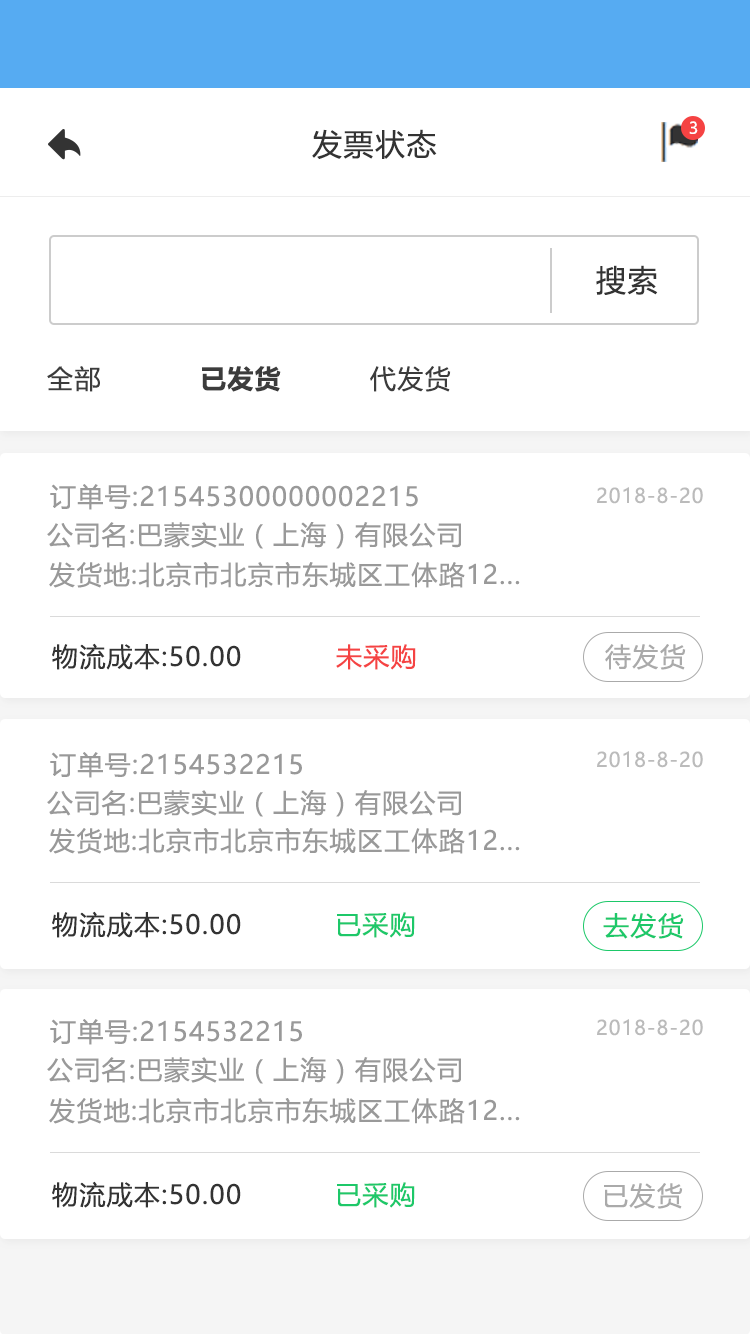
<style>
.page{position:relative;width:750px;height:1334px;background:#ffffff}
.page>*{position:absolute;margin:0}
.t1{font:16px "MicrosoftYaHeiUI";color:#ffffff}
.t2{font:30px "MicrosoftYaHeiUI";letter-spacing:0.05em;color:#333333}
.t3{font:26px "MicrosoftYaHeiUI";letter-spacing:0.05em;color:#3c3c3c}
.t4{font:26px "MicrosoftYaHeiUI-Bold";letter-spacing:0.05em;color:#3c3c3c}
.t5{font:26px "MicrosoftYaHeiUI";letter-spacing:0.05em;color:#999999}
.t6{font:20px "MicrosoftYaHeiUI";letter-spacing:0.05em;color:#bbbbbb}
.t7{font:26px "MicrosoftYaHeiUI";letter-spacing:0.05em;color:#333333}
.t8{font:26px "MicrosoftYaHeiUI";letter-spacing:0.05em;color:#f54343}
.t9{font:26px "MicrosoftYaHeiUI";letter-spacing:0.05em;color:#aaaaaa}
.t10{font:26px "MicrosoftYaHeiUI";letter-spacing:0.05em;color:#1dc869}
</style>
<div class="page">
<p class="t1" style="left:689px;top:121px;width:9px;height:13px">3</p>
<p class="t2" style="left:312px;top:129px;width:125px;height:30px">发票状态</p>
<p class="t2" style="left:596px;top:265px;width:62px;height:30px">搜索</p>
<p class="t3" style="left:47px;top:366px;width:53px;height:26px">全部</p>
<p class="t4" style="left:202px;top:366px;width:79px;height:26px">已发货</p>
<p class="t3" style="left:370px;top:366px;width:81px;height:26px">代发货</p>
<p class="t5" style="left:50px;top:484px;width:368px;height:26px">订单号:21545300000002215</p>
<p class="t6" style="left:597px;top:487px;width:106px;height:17px">2018-8-20</p>
<p class="t5" style="left:47px;top:522px;width:414px;height:27px">公司名:巴蒙实业（上海）有限公司</p>
<p class="t5" style="left:49px;top:562px;width:471px;height:26px">发货地:北京市北京市东城区工体路12...</p>
<p class="t7" style="left:52px;top:643px;width:189px;height:27px">物流成本:50.00</p>
<p class="t8" style="left:336px;top:644px;width:80px;height:26px">未采购</p>
<p class="t9" style="left:605px;top:644px;width:81px;height:26px">待发货</p>
<p class="t5" style="left:50px;top:752px;width:252px;height:26px">订单号:2154532215</p>
<p class="t6" style="left:597px;top:751px;width:106px;height:17px">2018-8-20</p>
<p class="t5" style="left:47px;top:790px;width:414px;height:27px">公司名:巴蒙实业（上海）有限公司</p>
<p class="t5" style="left:49px;top:828px;width:471px;height:26px">发货地:北京市北京市东城区工体路12...</p>
<p class="t7" style="left:52px;top:911px;width:189px;height:27px">物流成本:50.00</p>
<p class="t10" style="left:337px;top:912px;width:78px;height:26px">已采购</p>
<p class="t10" style="left:603px;top:913px;width:81px;height:26px">去发货</p>
<p class="t5" style="left:50px;top:1019px;width:252px;height:26px">订单号:2154532215</p>
<p class="t6" style="left:597px;top:1019px;width:106px;height:17px">2018-8-20</p>
<p class="t5" style="left:47px;top:1057px;width:414px;height:27px">公司名:巴蒙实业（上海）有限公司</p>
<p class="t5" style="left:49px;top:1098px;width:471px;height:26px">发货地:北京市北京市东城区工体路12...</p>
<p class="t7" style="left:52px;top:1181px;width:189px;height:27px">物流成本:50.00</p>
<p class="t10" style="left:337px;top:1182px;width:78px;height:26px">已采购</p>
<p class="t9" style="left:604px;top:1183px;width:79px;height:26px">已发货</p>
</div>
